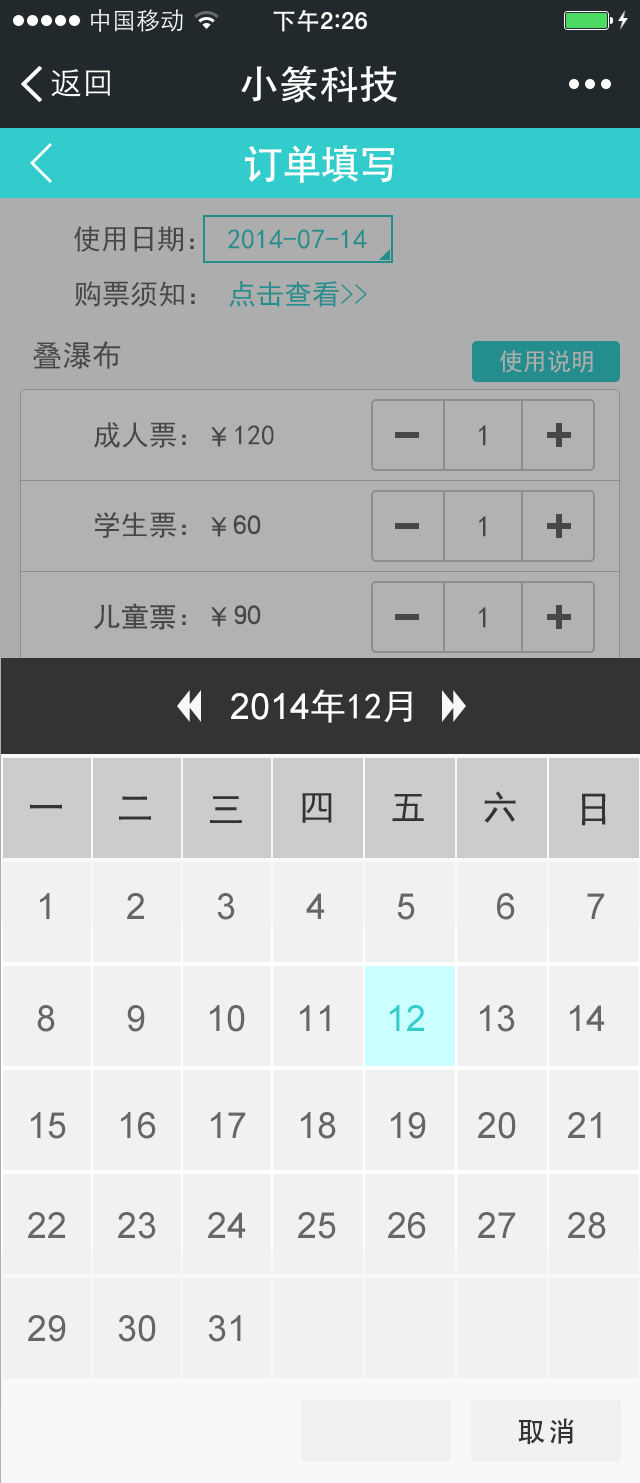
<style>
.page{position:relative;width:640px;height:1483px;background:#f1f1f1}
.page>*{position:absolute;margin:0}
.t1{font:40px "AdobeHeitiStd-Regular";color:#ffffff}
.t2{font:28px "SimHei"}
.t3{font:30px "SimHei";color:#474747}
.t4{font:24px "SimHei";color:#adadad}
.t5{font:28px/90px "SimHei";color:#474747}
.t6{font:28px/90px "ç»å¸é»ä½ç®-regular";color:#474747}
.t7{font:36px "ArialMT";color:#ffffff}
.t8{font:36px "SimHei";color:#ffffff}
.t9{font:36px "SimHei";color:#333333}
.t10{font:36px "ArialMT";color:#666666}
.t11{font:36px "ArialMT";color:#33cccc}
.t12{font:28px "AdobeHeitiStd-Regular";letter-spacing:0.1em;color:#333333}
</style>
<div class="page">
<p class="t1" style="left:245px;top:145px;width:149px;height:38px">订单填写</p>
<p class="t2" style="left:74px;top:226px;width:293px;height:26px">使用日期： 2014-07-14</p>
<p class="t2" style="left:75px;top:281px;width:292px;height:26px">购票须知： 点击查看&gt;&gt;</p>
<p class="t3" style="left:33px;top:341px;width:88px;height:28px">叠瀑布</p>
<p class="t4" style="left:499px;top:350px;width:94px;height:23px">使用说明</p>
<p class="t5" style="left:94px;top:422px;width:180px;height:208px">成人票：<span class="t6">￥</span>120<br>学生票：<span class="t6">￥60<br>儿童票</span>：<span class="t6">￥90</span></p>
<p class="t3" style="left:479px;top:425px;width:7px;height:21px">1</p>
<p class="t3" style="left:479px;top:516px;width:7px;height:21px">1</p>
<p class="t3" style="left:479px;top:607px;width:7px;height:21px">1</p>
<p class="t7" style="left:231px;top:689px;width:181px;height:34px">2014<span class="t8">年12月</span></p>
<p class="t9" style="left:119px;top:796px;width:32px;height:24px">二</p>
<p class="t9" style="left:210px;top:796px;width:32px;height:27px">三</p>
<p class="t9" style="left:302px;top:793px;width:30px;height:30px">四</p>
<p class="t9" style="left:392px;top:794px;width:32px;height:28px">五</p>
<p class="t9" style="left:484px;top:791px;width:32px;height:32px">六</p>
<p class="t9" style="left:582px;top:793px;width:24px;height:33px">日</p>
<p class="t9" style="left:30px;top:804px;width:32px;height:5px">一</p>
<p class="t10" style="left:40px;top:893px;width:565px;height:27px">1       2       3       4       5        6       7</p>
<p class="t10" style="left:37px;top:1005px;width:568px;height:27px">8       9      10     11     <span class="t11">12 </span>    13     14</p>
<p class="t10" style="left:31px;top:1112px;width:570px;height:27px">15     16     17     18     19     20     21</p>
<p class="t10" style="left:28px;top:1212px;width:578px;height:27px">22     23     24     25     26     27     28</p>
<p class="t10" style="left:28px;top:1315px;width:213px;height:27px">29     30     31</p>
<p class="t12" style="left:518px;top:1418px;width:56px;height:27px">取消</p>
</div>
